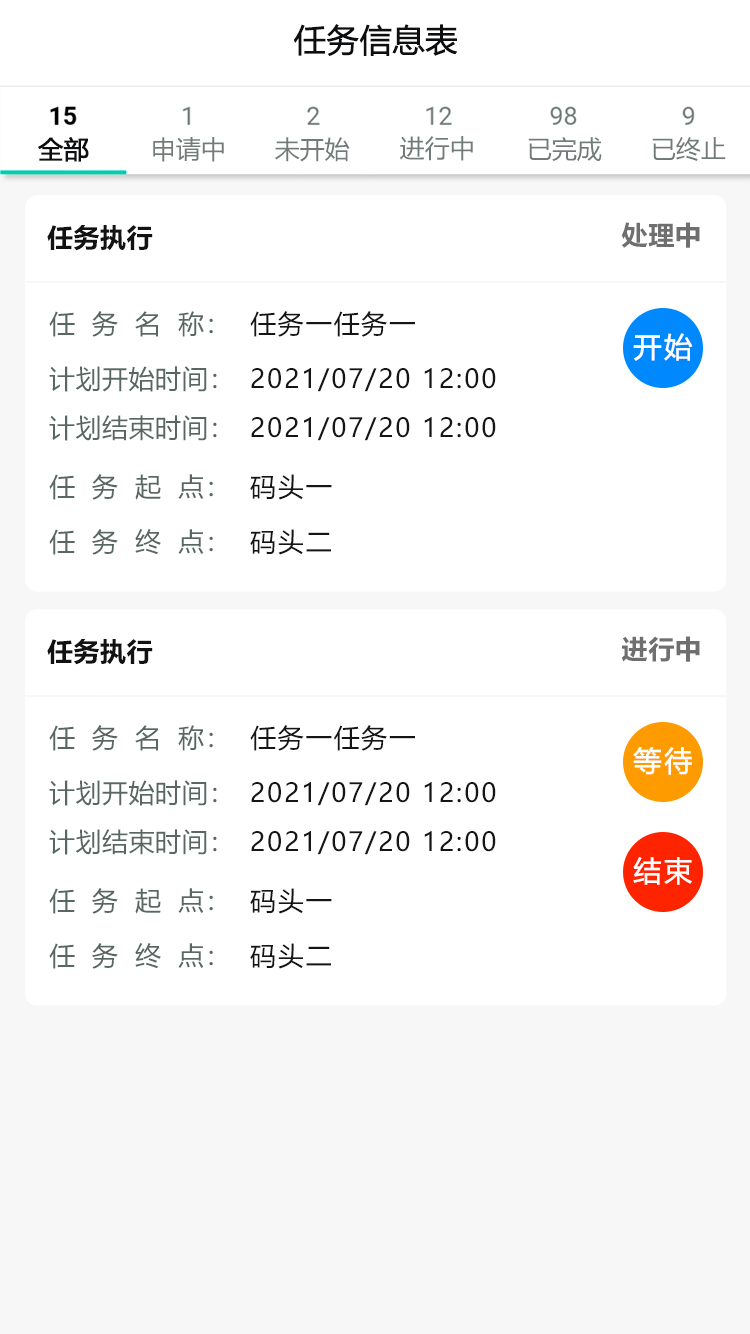
<style>
.page{position:relative;width:750px;height:1334px;background:#ffffff}
.page>*{position:absolute;margin:0}
.t1{font:32px "MicrosoftYaHei";color:#0c0e10;font-weight:bold}
.t2{font:25px "MicrosoftYaHei";color:#0c0e10;font-weight:bold}
.t3{font:25px "MicrosoftYaHei";color:#717c7a}
.t4{font:26px "MicrosoftYaHei-Bold";letter-spacing:0.03em;color:#6f6f6f}
.t5{font:26px "MicrosoftYaHei-Bold";letter-spacing:0.02em;color:#121212}
.t6{font:26px "MicrosoftYaHei";letter-spacing:0.02em;color:#596762}
.t7{font:26px "MicrosoftYaHei";letter-spacing:0.07em;color:#151515}
.t8{font:28px "MicrosoftYaHei";letter-spacing:0.07em;color:#ffffff;font-weight:bold}
</style>
<div class="page">
<p class="t1" style="left:293px;top:24px;width:165px;height:32px">任务信息表</p>
<p class="t2" style="left:38px;top:137px;width:51px;height:25px">全部</p>
<p class="t3" style="left:153px;top:137px;width:71px;height:25px">申请中</p>
<p class="t3" style="left:275px;top:137px;width:75px;height:25px">未开始</p>
<p class="t3" style="left:400px;top:136px;width:73px;height:25px">进行中</p>
<p class="t3" style="left:528px;top:137px;width:74px;height:24px">已完成</p>
<p class="t3" style="left:652px;top:137px;width:74px;height:24px">已终止</p>
<p class="t4" style="left:621px;top:222px;width:79px;height:26px">处理中</p>
<p class="t5" style="left:47px;top:225px;width:106px;height:26px">任务执行</p>
<p class="t6" style="left:49px;top:311px;width:164px;height:26px">任  务  名  称：</p>
<p class="t7" style="left:250px;top:311px;width:165px;height:26px">任务一任务一</p>
<p class="t8" style="left:633px;top:333px;width:60px;height:28px">开始</p>
<p class="t6" style="left:49px;top:366px;width:168px;height:26px">计划开始时间：</p>
<p class="t7" style="left:251px;top:368px;width:245px;height:24px">2021/07/20 12:00</p>
<p class="t6" style="left:49px;top:415px;width:168px;height:26px">计划结束时间：</p>
<p class="t7" style="left:251px;top:417px;width:245px;height:24px">2021/07/20 12:00</p>
<p class="t6" style="left:49px;top:474px;width:164px;height:26px">任  务  起  点：</p>
<p class="t7" style="left:250px;top:474px;width:82px;height:26px">码头一</p>
<p class="t6" style="left:49px;top:529px;width:164px;height:26px">任  务  终  点：</p>
<p class="t7" style="left:250px;top:529px;width:81px;height:26px">码头二</p>
<p class="t5" style="left:47px;top:639px;width:106px;height:26px">任务执行</p>
<p class="t4" style="left:622px;top:636px;width:78px;height:26px">进行中</p>
<p class="t6" style="left:49px;top:725px;width:164px;height:26px">任  务  名  称：</p>
<p class="t7" style="left:250px;top:725px;width:165px;height:26px">任务一任务一</p>
<p class="t8" style="left:633px;top:747px;width:59px;height:28px">等待</p>
<p class="t6" style="left:49px;top:780px;width:168px;height:26px">计划开始时间：</p>
<p class="t7" style="left:251px;top:782px;width:245px;height:24px">2021/07/20 12:00</p>
<p class="t6" style="left:49px;top:829px;width:168px;height:26px">计划结束时间：</p>
<p class="t7" style="left:251px;top:831px;width:245px;height:24px">2021/07/20 12:00</p>
<p class="t8" style="left:633px;top:857px;width:59px;height:28px">结束</p>
<p class="t6" style="left:49px;top:888px;width:164px;height:26px">任  务  起  点：</p>
<p class="t7" style="left:250px;top:888px;width:82px;height:26px">码头一</p>
<p class="t6" style="left:49px;top:943px;width:164px;height:26px">任  务  终  点：</p>
<p class="t7" style="left:250px;top:943px;width:81px;height:26px">码头二</p>
</div>
